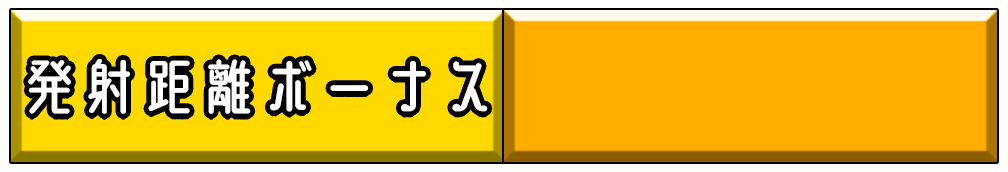
<style>
.page{position:relative;width:1008px;height:172px;background:#ffae00}
.page>*{position:absolute;margin:0}
.t1{font:66.7px "Ronde-B-Square";letter-spacing:-0.1em;color:#ffffff;font-variant:small-caps}
</style>
<div class="page">
<p class="t1" style="left:28px;top:59px;width:460px;height:55px">発射距離ボーナス</p>
</div>
